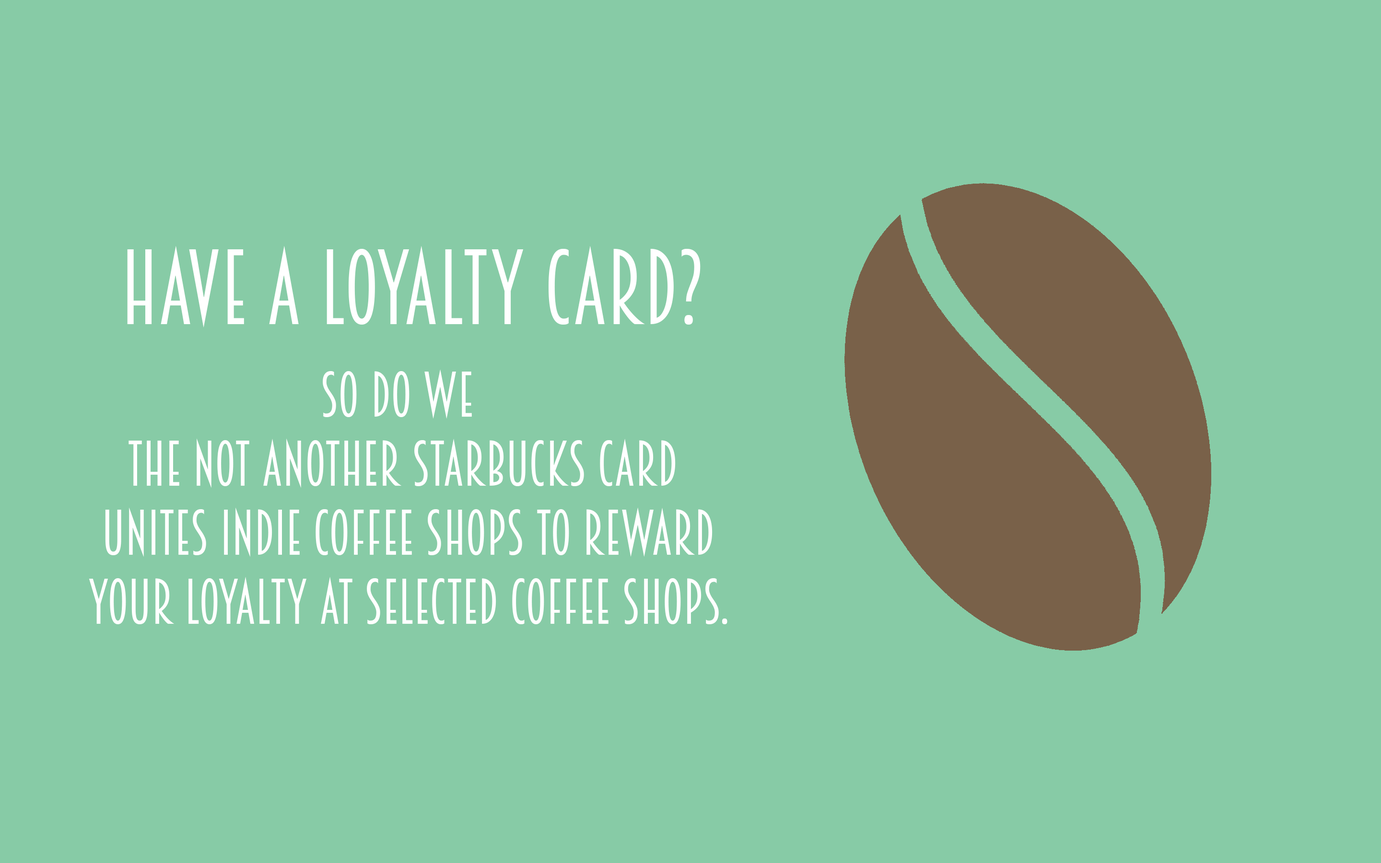
<style>
.page{position:relative;width:1381px;height:863px;background:#87cba6}
.page>*{position:absolute;margin:0}
.t1{font:95.9px "Breamcatcher-Regular";color:#ffffff}
.t2{font:57.6px "Breamcatcher-Regular";color:#ffffff}
</style>
<div class="page">
<p class="t1" style="left:127px;top:246px;width:574px;height:82px">have a loyalty card?</p>
<p class="t2" style="left:89px;top:369px;width:639px;height:255px;text-align:center">so do we <br>the not another starbucks card<br> unites indie coffee shops to reward<br> your loyalty at selected coffee shops.</p>
</div>
